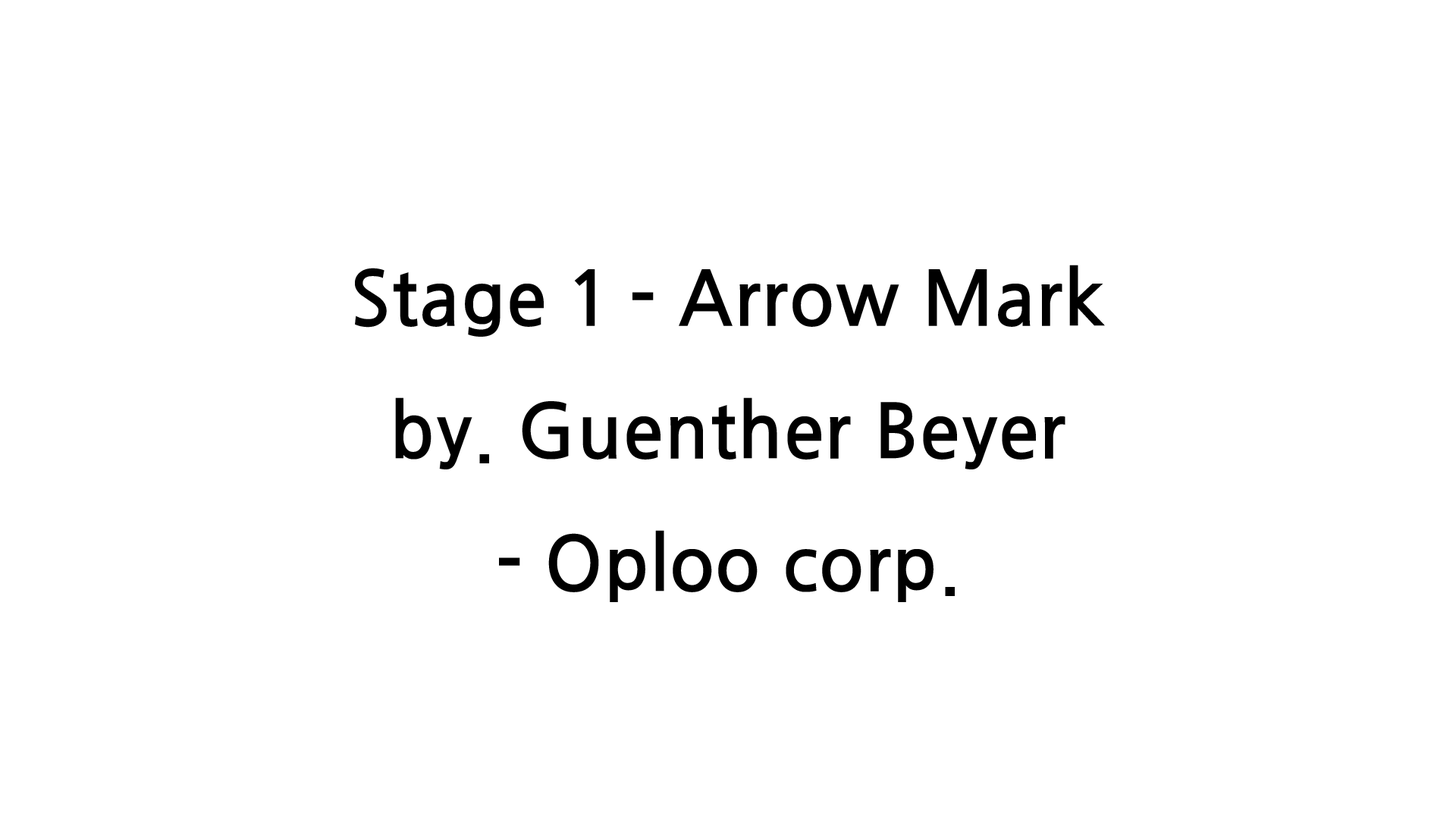
<style>
.page{position:relative;width:1456px;height:819px;background:#ffffff}
.page>*{position:absolute;margin:0}
.t1{font:75.8px "JejuGothic";color:#000000}
</style>
<div class="page">
<p class="t1" style="left:355px;top:265px;width:750px;height:337px;text-align:center">Stage 1 - Arrow Mark<br>by. Guenther Beyer<br>- Oploo corp.</p>
</div>
